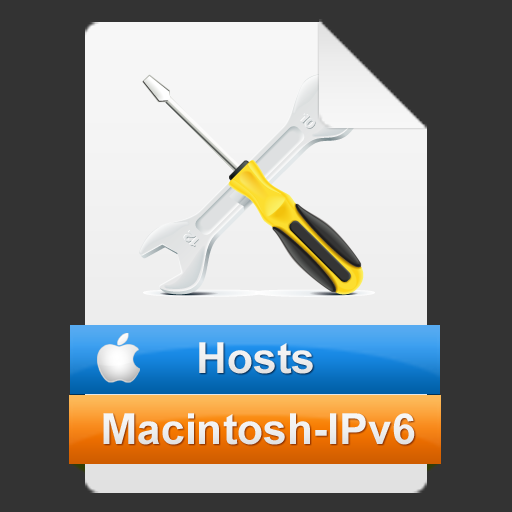
<style>
.page{position:relative;width:512px;height:512px;background:#333333}
.page>*{position:absolute;margin:0}
.t1{font:42.8px "Arial-BoldMT";color:#ffffff}
</style>
<div class="page">
<p class="t1" style="left:199px;top:342px;width:114px;height:32px">Hosts</p>
<p class="t1" style="left:103px;top:413px;width:312px;height:32px">Macintosh-IPv6</p>
</div>
